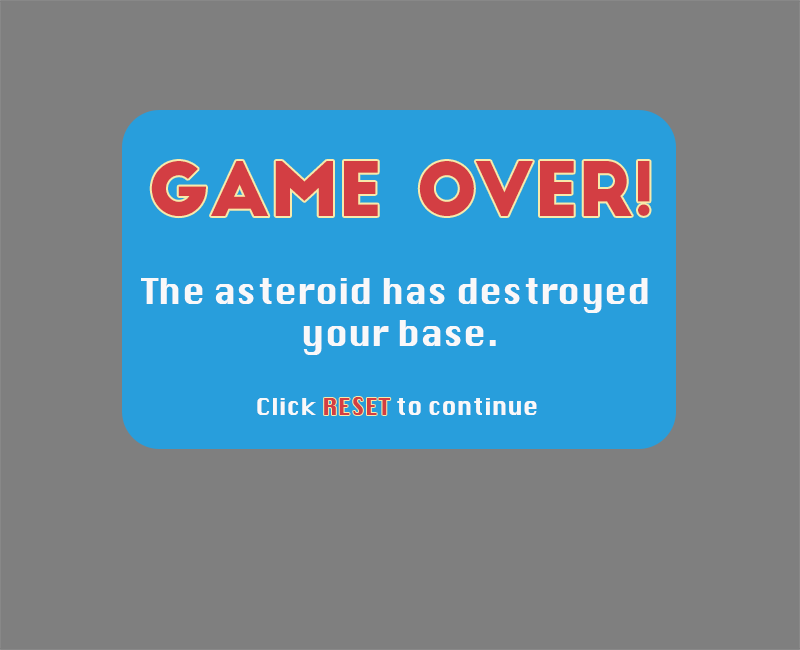
<style>
.page{position:relative;width:800px;height:650px;background:#7f7f7f}
.page>*{position:absolute;margin:0}
.t1{font:72.6px "BigJohn";color:#d33e43}
.t2{font:34.8px "Krungthep";color:#f9f8f9}
.t3{font:23.3px "Krungthep";color:#f9f8f9}
.t4{font:23.3px "Krungthep";color:#d33e43}
.t5{font:34.8px "Krungthep";color:#d33e43}
</style>
<div class="page">
<p class="t1" style="left:151px;top:161px;width:499px;height:56px">Game over!</p>
<p class="t2" style="left:141px;top:278px;width:507px;height:137px;text-align:center">The asteroid has destroyed <br>your base.<br><br><span class="t3">Click              to continue</span></p>
<p class="t4" style="left:324px;top:397px;width:67px;height:18px"><span class="t5"><br><br><br></span>RESET</p>
</div>
